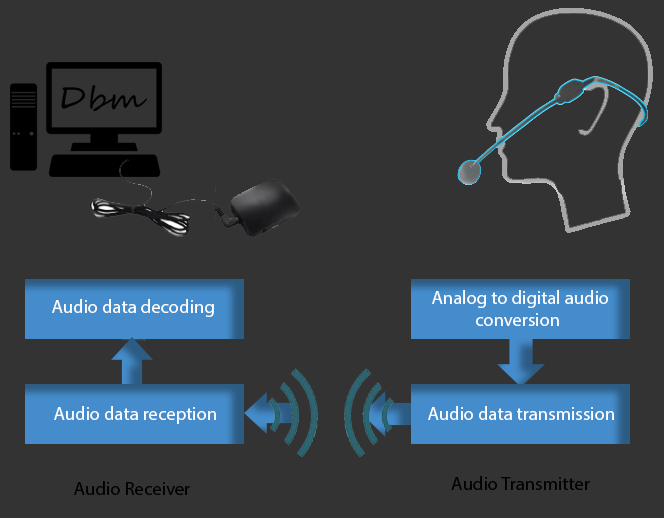
<style>
.page{position:relative;width:664px;height:518px;background:#333333}
.page>*{position:absolute;margin:0}
.t1{font:18.7px "MyriadPro-Regular";color:#ffffff}
.t2{font:18.7px "MyriadPro-Regular";color:#000000}
</style>
<div class="page">
<p class="t1" style="left:432px;top:290px;width:176px;height:36px">Analog to digital audio <br>           conversion</p>
<p class="t1" style="left:52px;top:299px;width:162px;height:18px">Audio data decoding</p>
<p class="t1" style="left:54px;top:406px;width:162px;height:18px">Audio data reception</p>
<p class="t1" style="left:428px;top:406px;width:186px;height:14px">Audio data transmission</p>
<p class="t2" style="left:74px;top:481px;width:116px;height:14px">Audio Receiver</p>
<p class="t2" style="left:451px;top:476px;width:139px;height:14px">Audio Transmitter</p>
</div>
